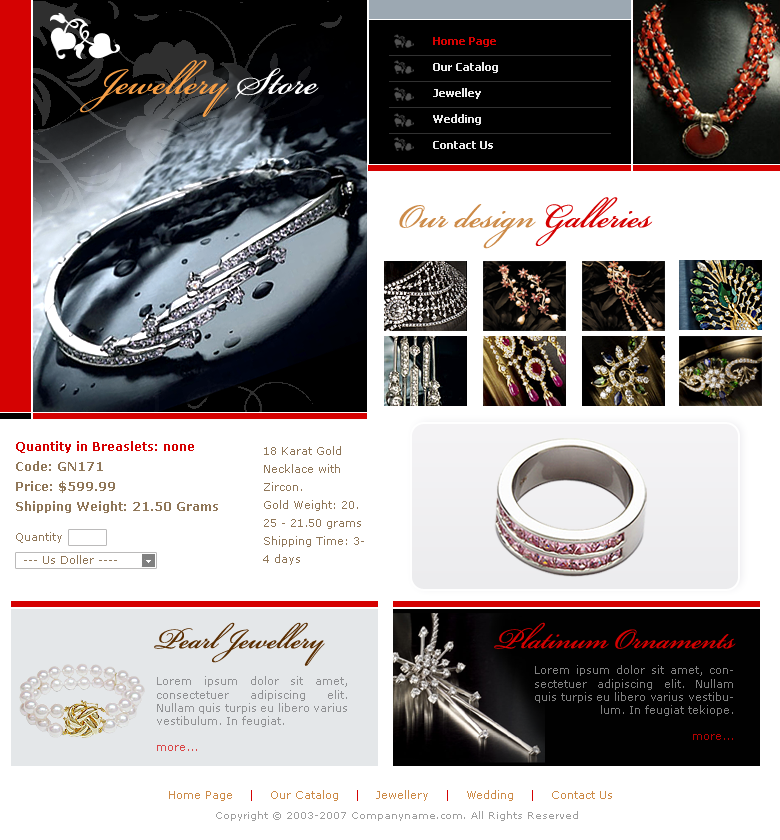
<style>
.page{position:relative;width:780px;height:840px;background:#ffffff}
.page>*{position:absolute;margin:0}
.t1{font:11px/26px "Tahoma-Bold";color:#e9e9e9}
.t2{font:11px/26px "Tahoma-Bold";color:#d50202}
.t3{font:58px "BeautifulES";color:#f69e45}
.t4{font:58px "BeautifulES";color:#ffffff}
.t5{font:52px "BeautifulES";color:#cd8b48}
.t6{font:52px "BeautifulES";color:#d50101}
.t7{font:12px/20px "Verdana-Bold";color:#907759}
.t8{font:12px/20px "Verdana-Bold";color:#d50101}
.t9{font:11px/18px "Verdana";color:#907759}
.t10{font:11px "Verdana";color:#907759}
.t11{font:44px "BeautifulES";color:#5a2d00}
.t12{font:44px "BeautifulES";color:#d50101}
.t13{font:11px "Verdana";color:#808080}
.t14{font:11px "Verdana";color:#919294}
.t15{font:11px "Verdana";color:#cd8b48}
.t16{font:11px "Verdana";color:#d50202}
.t17{font:10px "Verdana";color:#9e9e9e}
</style>
<div class="page">
<p class="t1" style="left:433px;top:37px;width:65px;height:112px"><span class="t2">Home Page<br></span>Our Catalog<br>Jewelley<br>Wedding<br>Contact Us</p>
<p class="t3" style="left:80px;top:60px;width:239px;height:57px">Jewellery <span class="t4">Store</span></p>
<p class="t5" style="left:399px;top:197px;width:254px;height:52px">Our design <span class="t6">Galleries</span></p>
<p class="t7" style="left:16px;top:441px;width:202px;height:72px"><span class="t8">Quantity in Breaslets: none <br></span>Code: GN171 <br>Price: $599.99 <br>Shipping Weight: 21.50 Grams</p>
<p class="t9" style="left:263px;top:446px;width:101px;height:119px">18 Karat Gold Necklace with Zircon.<br>Gold Weight: 20.25 - 21.50 grams<br>Shipping Time: 3-4 days</p>
<p class="t10" style="left:16px;top:532px;width:46px;height:11px">Quantity</p>
<p class="t10" style="left:24px;top:555px;width:93px;height:9px">--- Us Doller ----</p>
<p class="t11" style="left:154px;top:622px;width:171px;height:44px">Pearl Jewellery</p>
<p class="t12" style="left:494px;top:622px;width:242px;height:27px">Platinum Ornaments</p>
<p class="t13" style="left:535px;top:665px;width:198px;height:75px;text-align:justify">Lorem ipsum dolor sit amet, consectetuer adipiscing elit. Nullam quis turpis eu libero varius vestibulum. In feugiat tekiope.<br> <br>more...</p>
<p class="t14" style="left:157px;top:676px;width:190px;height:75px;text-align:justify">Lorem ipsum dolor sit amet, consectetuer adipiscing elit. Nullam quis turpis eu libero varius vestibulum. In feugiat. <br> <br>more...</p>
<p class="t15" style="left:169px;top:790px;width:443px;height:11px">Home Page    <span class="t16">|</span>    Our Catalog    <span class="t16">|</span>    Jewellery    <span class="t16">|</span>    Wedding    <span class="t16">|</span>    Contact Us</p>
<p class="t17" style="left:216px;top:811px;width:362px;height:10px">Copyright © 2003-2007 Companyname.com. All Rights Reserved</p>
</div>
